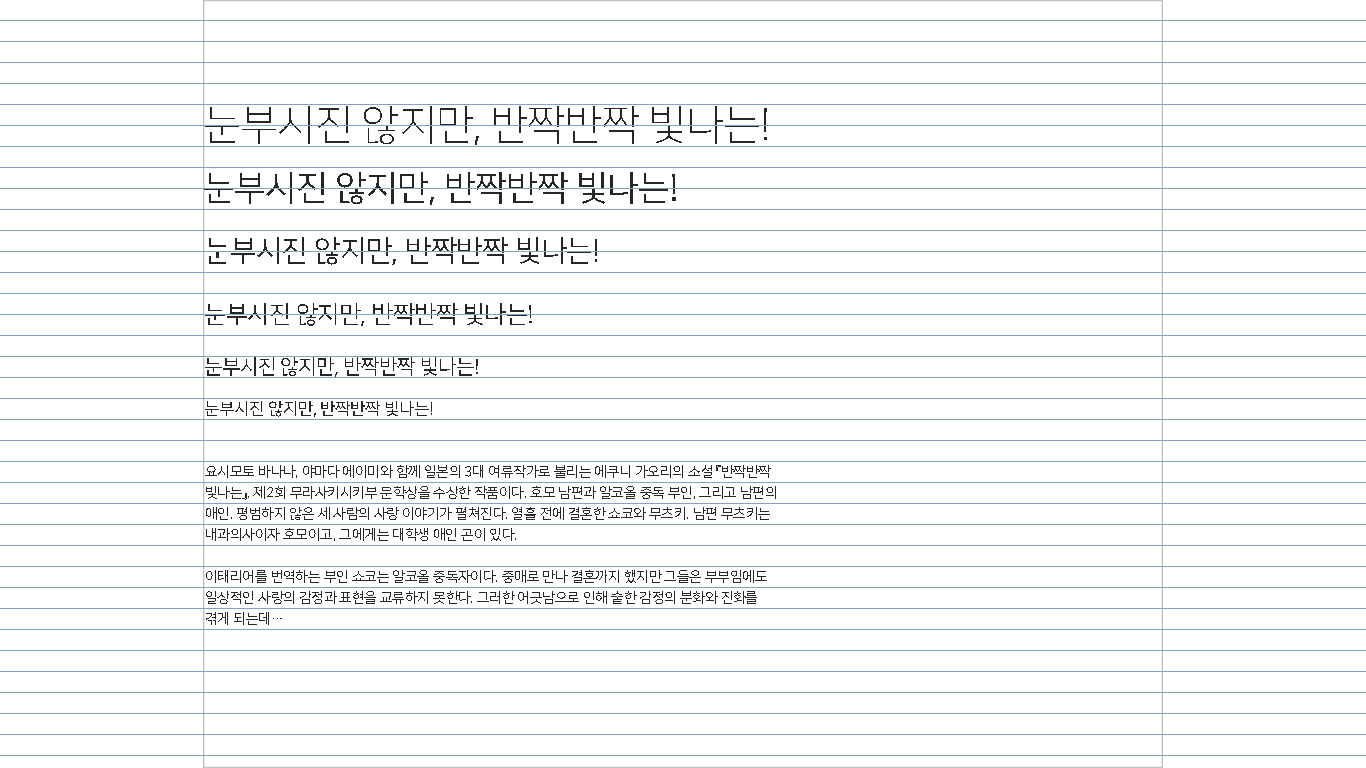
<style>
.page{position:relative;width:1366px;height:768px;background:#ffffff}
.page>*{position:absolute;margin:0}
.t1{font:41.8px "NanumSquareOTFL";letter-spacing:-0.02em;color:#262626}
.t2{font:34.8px "NanumSquareOTFR";letter-spacing:-0.02em;color:#262626}
.t3{font:29px "NanumSquareOTFR";letter-spacing:-0.02em;color:#262626}
.t4{font:24.2px "NanumSquareOTFR";letter-spacing:-0.02em;color:#262626}
.t5{font:20.2px "NanumSquareOTFR";letter-spacing:-0.02em;color:#262626}
.t6{font:16.8px "NanumSquareOTFR";letter-spacing:-0.02em;color:#262626}
.t7{font:14px "NanumSquareOTFR";letter-spacing:-0.02em;color:#262626}
</style>
<div class="page">
<p class="t1" style="left:205px;top:106px;width:562px;height:39px">눈부시진 않지만, 반짝반짝 빛나는!</p>
<p class="t2" style="left:204px;top:172px;width:472px;height:33px">눈부시진 않지만, 반짝반짝 빛나는!</p>
<p class="t3" style="left:205px;top:237px;width:392px;height:28px">눈부시진 않지만, 반짝반짝 빛나는!</p>
<p class="t4" style="left:205px;top:303px;width:327px;height:23px">눈부시진 않지만, 반짝반짝 빛나는!</p>
<p class="t5" style="left:205px;top:357px;width:273px;height:20px">눈부시진 않지만, 반짝반짝 빛나는!</p>
<p class="t6" style="left:205px;top:401px;width:227px;height:16px">눈부시진 않지만, 반짝반짝 빛나는!</p>
<p class="t7" style="left:205px;top:465px;width:571px;height:160px">요시모토 바나나, 야마다 에이미와 함께 일본의 3대 여류작가로 불리는 에쿠니 가오리의 소설 『반짝반짝 빛나는』. 제2회 무라사키시키부 문학상을 수상한 작품이다. 호모 남편과 알코올 중독 부인, 그리고 남편의 애인. 평범하지 않은 세 사람의 사랑 이야기가 펼쳐진다. 열흘 전에 결혼한 쇼코와 무츠키. 남편 무츠키는 내과의사이자 호모이고, 그에게는 대학생 애인 곤이 있다. <br>이태리어를 번역하는 부인 쇼코는 알코올 중독자이다. 중매로 만나 결혼까지 했지만 그들은 부부임에도 일상적인 사랑의 감정과 표현을 교류하지 못한다. 그러한 어긋남으로 인해 숱한 감정의 분화와 진화를 겪게 되는데…</p>
</div>
